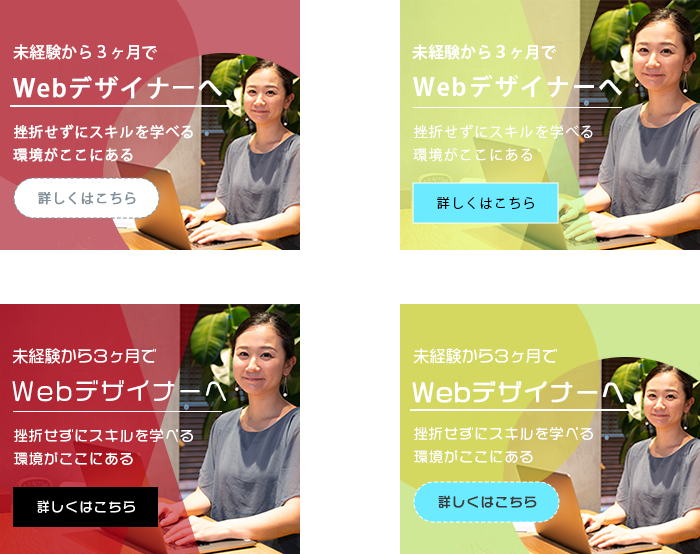
<style>
.page{position:relative;width:700px;height:554px;background:#ffffff}
.page>*{position:absolute;margin:0}
.t1{font:16px "KozGoPr6N-Medium";color:#ffffff}
.t2{font:16px "KozGoPr6N-Bold";color:#ffffff}
.t3{font:24px "KozGoPr6N-Medium";letter-spacing:0.04em;color:#ffffff;font-weight:bold}
.t4{font:24px "KozGoPr6N-Bold";letter-spacing:0.08em;color:#ffffff}
.t5{font:14px/22.4px "KozGoPr6N-Regular";letter-spacing:0.08em;color:#ffffff;font-weight:bold}
.t6{font:14px/22.4px "KozGoPr6N-Regular";letter-spacing:0.08em;color:#ffffff}
.t7{font:13px "KozGoPr6N-Regular";letter-spacing:0.1em;color:#83909a;font-weight:bold}
.t8{font:13px "KozGoPr6N-Regular";letter-spacing:0.1em;color:#000001}
.t9{font:16px "VDL-LogoMaru-Regular";color:#ffffff}
.t10{font:24px "VDL-LogoMaru-Regular";letter-spacing:0.08em;color:#ffffff}
.t11{font:24px "VDL-LogoMaru-Regular";letter-spacing:0.04em;color:#ffffff;font-weight:bold}
.t12{font:14px/22.4px "VDL-LogoMaru-Regular";letter-spacing:0.08em;color:#ffffff}
.t13{font:13px "VDL-LogoMaru-Regular";letter-spacing:0.1em;color:#3e3a39;font-weight:bold}
.t14{font:13px "VDL-LogoMaru-Regular";letter-spacing:0.1em;color:#ffffff}
</style>
<div class="page">
<p class="t1" style="left:13px;top:44px;width:144px;height:16px">未経験から３ヶ月で</p>
<p class="t2" style="left:412px;top:44px;width:144px;height:16px">未経験から３ヶ月で</p>
<p class="t3" style="left:13px;top:76px;width:209px;height:23px">Webデザイナーへ</p>
<p class="t4" style="left:413px;top:74px;width:209px;height:24px">Webデザイナーへ</p>
<p class="t5" style="left:13px;top:124px;width:180px;height:38px">挫折せずにスキルを学べる<br>環境がここにある</p>
<p class="t6" style="left:413px;top:124px;width:180px;height:38px">挫折せずにスキルを学べる<br>環境がここにある</p>
<p class="t7" style="left:38px;top:191px;width:98px;height:14px">詳しくはこちら</p>
<p class="t8" style="left:437px;top:197px;width:97px;height:12px">詳しくはこちら</p>
<p class="t9" style="left:12px;top:348px;width:144px;height:16px">未経験から３ヶ月で</p>
<p class="t9" style="left:413px;top:348px;width:144px;height:16px">未経験から３ヶ月で</p>
<p class="t10" style="left:12px;top:380px;width:214px;height:22px">Webデザイナーへ</p>
<p class="t11" style="left:412px;top:381px;width:212px;height:22px">Webデザイナーへ</p>
<p class="t12" style="left:14px;top:429px;width:179px;height:37px">挫折せずにスキルを学べる<br>環境がここにある</p>
<p class="t12" style="left:414px;top:427px;width:179px;height:37px">挫折せずにスキルを学べる<br>環境がここにある</p>
<p class="t13" style="left:438px;top:495px;width:99px;height:14px">詳しくはこちら</p>
<p class="t14" style="left:37px;top:500px;width:98px;height:13px">詳しくはこちら</p>
</div>
